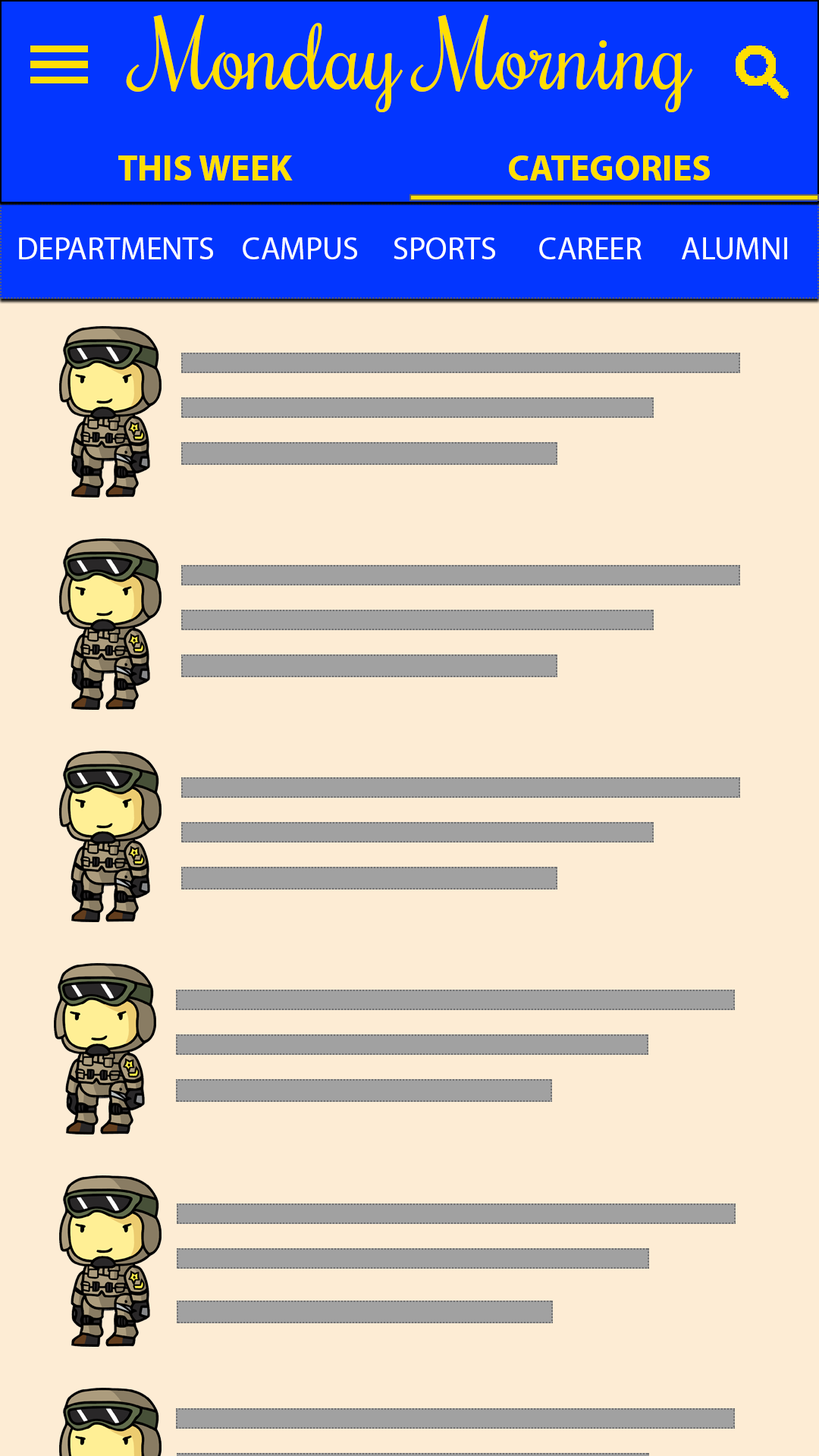
<style>
.page{position:relative;width:819px;height:1456px;background:#fdecd4}
.page>*{position:absolute;margin:0}
.t1{font:91px "Rochester-Regular";color:#ffde03}
.t2{font:36.4px "MyriadPro-Bold";color:#ffde03}
.t3{font:31.8px "MyriadPro-Regular";color:#ffffff}
</style>
<div class="page">
<p class="t1" style="left:126px;top:14px;width:567px;height:98px">Monday Morning</p>
<p class="t2" style="left:118px;top:155px;width:175px;height:25px">THIS WEEK</p>
<p class="t2" style="left:509px;top:155px;width:201px;height:25px">CATEGORIES</p>
<p class="t3" style="left:19px;top:237px;width:194px;height:22px">DEPARTMENTS</p>
<p class="t3" style="left:243px;top:237px;width:114px;height:22px">CAMPUS</p>
<p class="t3" style="left:394px;top:237px;width:101px;height:22px">SPORTS</p>
<p class="t3" style="left:539px;top:237px;width:103px;height:22px">CAREER</p>
<p class="t3" style="left:682px;top:237px;width:105px;height:22px">ALUMNI</p>
</div>
